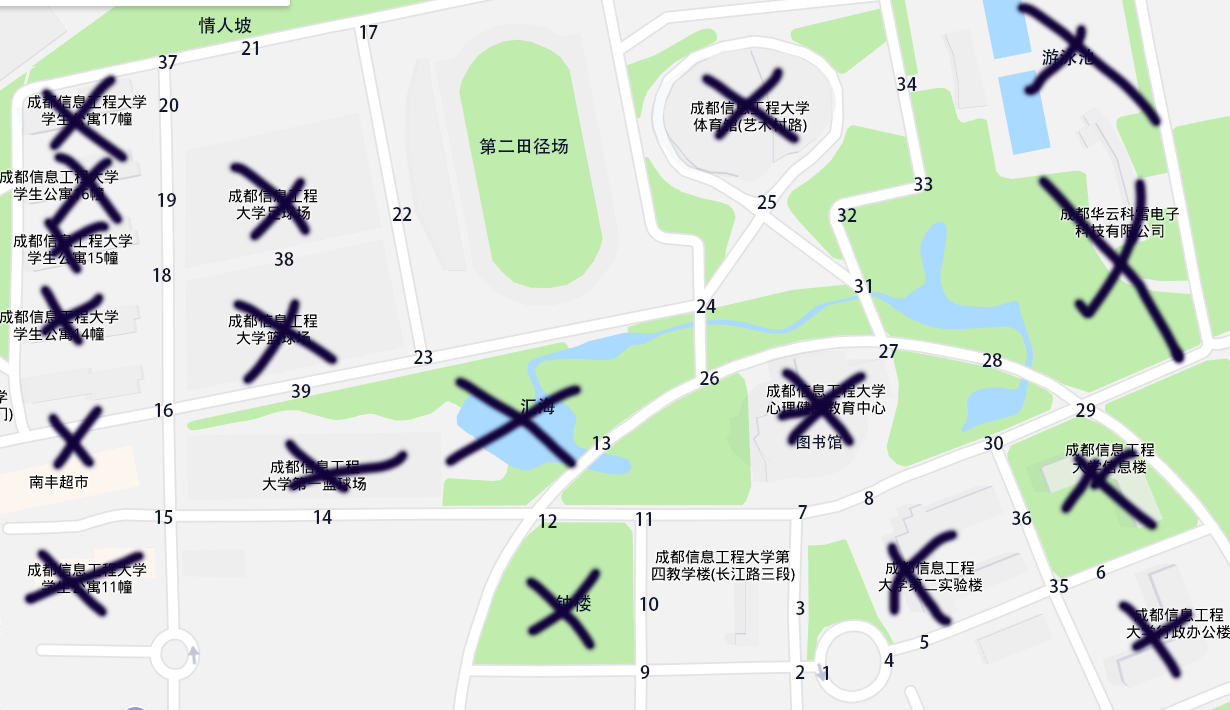
<style>
.page{position:relative;width:1230px;height:710px;background:#f3f2f2}
.page>*{position:absolute;margin:0}
.t1{font:18px "AdobeHeitiStd-Regular";color:#111733}
</style>
<div class="page">
<p class="t1" style="left:360px;top:25px;width:18px;height:14px">17</p>
<p class="t1" style="left:241px;top:41px;width:17px;height:14px">21</p>
<p class="t1" style="left:158px;top:55px;width:19px;height:14px">37</p>
<p class="t1" style="left:897px;top:77px;width:20px;height:14px">34</p>
<p class="t1" style="left:159px;top:98px;width:20px;height:14px">20</p>
<p class="t1" style="left:914px;top:177px;width:19px;height:14px">33</p>
<p class="t1" style="left:158px;top:193px;width:18px;height:14px">19</p>
<p class="t1" style="left:757px;top:195px;width:19px;height:14px">25</p>
<p class="t1" style="left:392px;top:207px;width:20px;height:14px">22</p>
<p class="t1" style="left:837px;top:208px;width:20px;height:14px">32</p>
<p class="t1" style="left:274px;top:252px;width:20px;height:14px">38</p>
<p class="t1" style="left:153px;top:268px;width:18px;height:14px">18</p>
<p class="t1" style="left:854px;top:279px;width:17px;height:14px">31</p>
<p class="t1" style="left:696px;top:299px;width:20px;height:14px">24</p>
<p class="t1" style="left:414px;top:350px;width:19px;height:14px">23</p>
<p class="t1" style="left:879px;top:344px;width:19px;height:14px">27</p>
<p class="t1" style="left:982px;top:353px;width:20px;height:14px">28</p>
<p class="t1" style="left:700px;top:371px;width:19px;height:14px">26</p>
<p class="t1" style="left:291px;top:384px;width:20px;height:14px">39</p>
<p class="t1" style="left:155px;top:403px;width:18px;height:14px">16</p>
<p class="t1" style="left:1076px;top:403px;width:20px;height:14px">29</p>
<p class="t1" style="left:593px;top:436px;width:18px;height:14px">13</p>
<p class="t1" style="left:984px;top:436px;width:19px;height:14px">30</p>
<p class="t1" style="left:864px;top:491px;width:10px;height:14px">8</p>
<p class="t1" style="left:155px;top:510px;width:18px;height:14px">15</p>
<p class="t1" style="left:314px;top:510px;width:18px;height:14px">14</p>
<p class="t1" style="left:798px;top:505px;width:9px;height:14px">7</p>
<p class="t1" style="left:539px;top:514px;width:18px;height:14px">12</p>
<p class="t1" style="left:636px;top:512px;width:15px;height:14px">11</p>
<p class="t1" style="left:1012px;top:511px;width:20px;height:14px">36</p>
<p class="t1" style="left:1096px;top:565px;width:10px;height:14px">6</p>
<p class="t1" style="left:1049px;top:579px;width:19px;height:14px">35</p>
<p class="t1" style="left:640px;top:597px;width:19px;height:14px">10</p>
<p class="t1" style="left:796px;top:601px;width:9px;height:14px">3</p>
<p class="t1" style="left:920px;top:635px;width:9px;height:14px">5</p>
<p class="t1" style="left:884px;top:653px;width:10px;height:14px">4</p>
<p class="t1" style="left:640px;top:665px;width:10px;height:14px">9</p>
<p class="t1" style="left:795px;top:665px;width:10px;height:14px">2</p>
<p class="t1" style="left:823px;top:666px;width:5px;height:14px">1</p>
</div>
